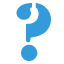
<style>
.page{position:relative;width:64px;height:64px;background:#ffffff}
.page>*{position:absolute;margin:0}
.t1{font:75px "StencilStd";color:#339bda}
</style>
<div class="page">
<p class="t1" style="left:16px;top:3px;width:35px;height:58px">?</p>
</div>
